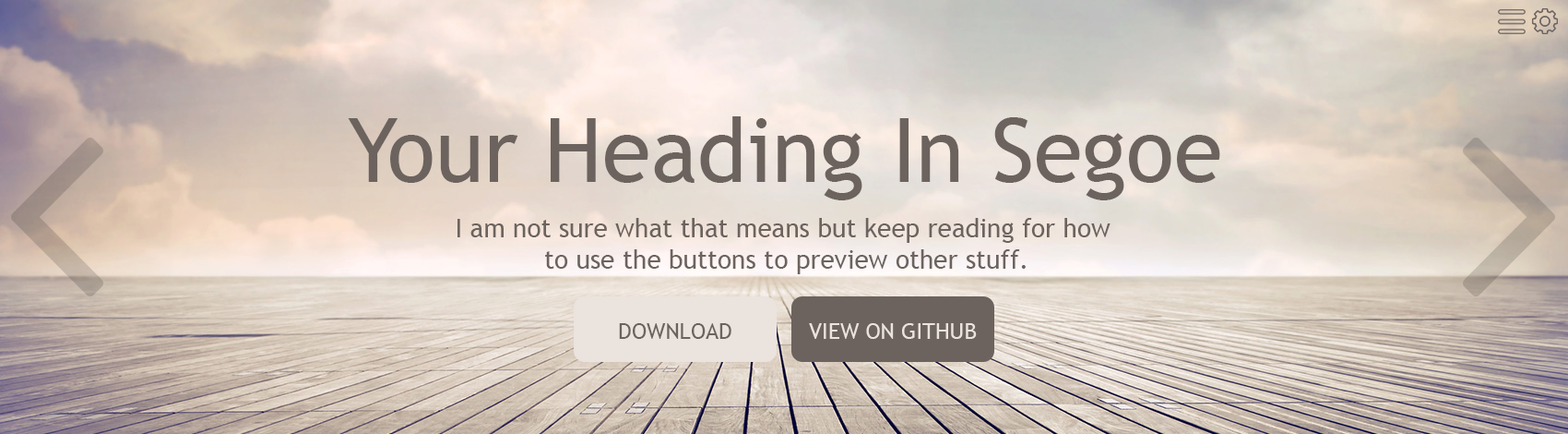
<style>
.page{position:relative;width:1568px;height:434px}
.page>*{position:absolute;margin:0}
.t1{font:88.5px "TrebuchetMS";color:#6c635e}
.t2{font:25.8px "TrebuchetMS";color:#6c635e}
.t3{font:22.1px "TrebuchetMS";color:#6c635e}
.t4{font:22.1px "TrebuchetMS";color:#ebe3de}
</style>
<div class="page">
<p class="t1" style="left:348px;top:116px;width:872px;height:84px">Your Heading In Segoe</p>
<p class="t2" style="left:457px;top:218px;width:654px;height:56px;text-align:center">I am not sure what that means but keep reading for how<br> to use the buttons to preview other stuff.</p>
<p class="t3" style="left:619px;top:323px;width:112px;height:16px">DOWNLOAD</p>
<p class="t4" style="left:809px;top:323px;width:168px;height:16px">VIEW ON GITHUB</p>
</div>
